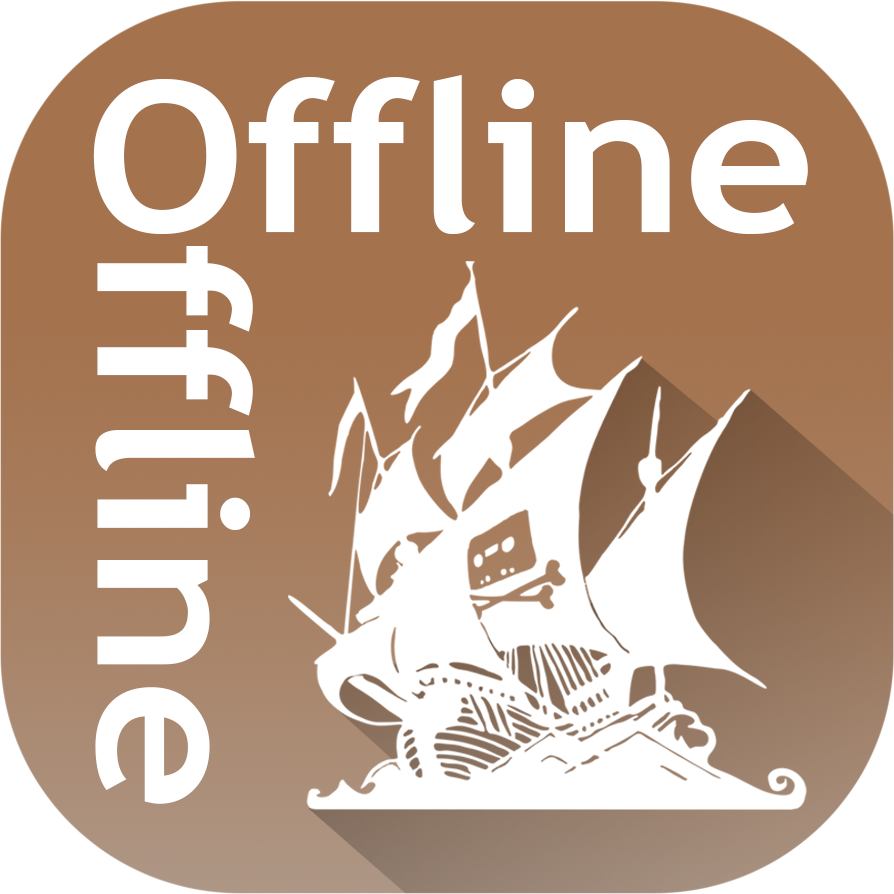
<style>
.page{position:relative;width:894px;height:894px;background:#ffffff}
.page>*{position:absolute;margin:0}
.t1{font:209.7px "TrebuchetMS-Bold";color:#ffffff;scale:1.09 1}
.t2{font:210.5px "TrebuchetMS-Bold";color:#ffffff;scale:1.08 1}
</style>
<div class="page">
<p class="t1" style="left:93px;top:75px;width:715px;height:159px">Offline</p>
<p class="t2" style="left:95px;top:246px;width:160px;height:558px;rotate:90deg">ffline</p>
</div>
